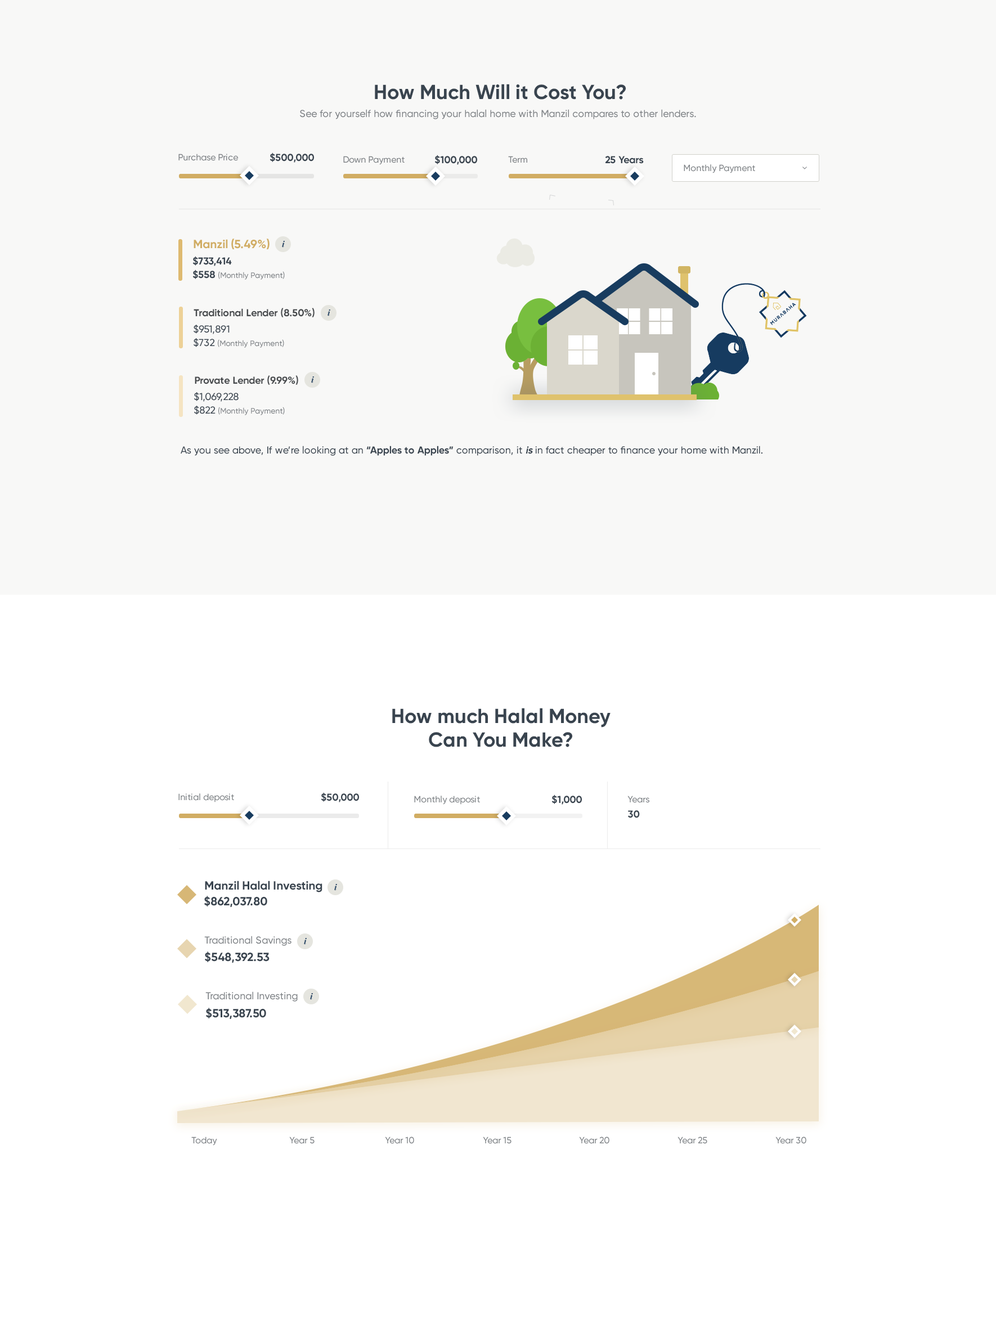
<style>
.page{position:relative;width:996px;height:1320px;background:#ffffff}
.page>*{position:absolute;margin:0}
.t1{font:20.2px "Gilroy-Bold";color:#39444f}
.t2{font:10.1px "Gilroy-Medium";color:#7e8286}
.t3{font:9px "Gilroy-Medium";color:#7e8286}
.t4{font:10.1px "Gilroy-Bold";color:#39444f}
.t5{font:11.8px "Gilroy-Bold";color:#d1ad63}
.t6{font:7.9px "PlayfairDisplay-BoldItalic";color:#183c5f}
.t7{font:7.9px/13.5px "Gilroy-Medium";color:#7e8286}
.t8{font:10.1px/13.5px "Gilroy-Bold";color:#39444f}
.t9{font:10.1px "Gilroy-Bold";color:#484b4e}
.t10{font:10.1px/13.5px "Gilroy-Medium";color:#39444f}
.t11{font:10.1px "Gilroy-Medium";color:#39444f}
.t12{font:10.1px "Gilroy-Bold";color:#39444f;font-style:italic}
.t13{font:20.2px/23.6px "Gilroy-Bold";color:#39444f}
.t14{font:11.8px "Gilroy-Bold";color:#39444f}
</style>
<div class="page">
<p class="t1" style="left:375px;top:84px;width:251px;height:16px">How Much Will it Cost You?</p>
<p class="t2" style="left:300px;top:109px;width:396px;height:10px">See for yourself how financing your halal home with Manzil compares to other lenders.</p>
<p class="t3" style="left:178px;top:154px;width:60px;height:7px">Purchase Price</p>
<p class="t4" style="left:269px;top:152px;width:45px;height:11px">$500,000</p>
<p class="t3" style="left:343px;top:156px;width:61px;height:9px">Down Payment</p>
<p class="t4" style="left:434px;top:155px;width:43px;height:10px">$100,000</p>
<p class="t3" style="left:508px;top:156px;width:19px;height:7px">Term</p>
<p class="t4" style="left:605px;top:156px;width:39px;height:8px">25 Years</p>
<p class="t3" style="left:683px;top:164px;width:72px;height:9px">Monthly Payment</p>
<p class="t5" style="left:194px;top:238px;width:75px;height:11px">Manzil (5.49%)</p>
<p class="t6" style="left:282px;top:241px;width:3px;height:7px">i</p>
<p class="t7" style="left:192px;top:256px;width:93px;height:24px"><span class="t8">$733,414<br>$558 </span>(Monthly Payment)</p>
<p class="t9" style="left:194px;top:308px;width:120px;height:9px">Traditional Lender (8.50%)</p>
<p class="t6" style="left:327px;top:309px;width:3px;height:7px">i</p>
<p class="t7" style="left:194px;top:325px;width:90px;height:23px"><span class="t10">$951,891<br>$732 </span>(Monthly Payment)</p>
<p class="t9" style="left:195px;top:375px;width:103px;height:10px">Provate Lender (9.99%)</p>
<p class="t6" style="left:311px;top:376px;width:3px;height:7px">i</p>
<p class="t7" style="left:194px;top:392px;width:91px;height:23px"><span class="t10">$1,069,228<br>$822 </span>(Monthly Payment)</p>
<p class="t11" style="left:181px;top:446px;width:581px;height:10px">As you see above, If we’re looking at an <span class="t4">“Apples to Apples”</span> comparison, it <span class="t12">is</span> in fact cheaper to finance your home with Manzil.</p>
<p class="t13" style="left:392px;top:708px;width:218px;height:39px;text-align:center">How much Halal Money<br>Can You Make?</p>
<p class="t3" style="left:178px;top:793px;width:56px;height:9px">Initial deposit</p>
<p class="t4" style="left:321px;top:792px;width:38px;height:10px">$50,000</p>
<p class="t3" style="left:414px;top:795px;width:66px;height:9px">Monthly deposit</p>
<p class="t4" style="left:551px;top:794px;width:31px;height:10px">$1,000</p>
<p class="t3" style="left:627px;top:795px;width:22px;height:8px">Years</p>
<p class="t4" style="left:628px;top:810px;width:12px;height:8px">30</p>
<p class="t14" style="left:205px;top:880px;width:117px;height:12px">Manzil Halal Investing</p>
<p class="t6" style="left:334px;top:884px;width:3px;height:6px">i</p>
<p class="t14" style="left:204px;top:896px;width:63px;height:11px">$862,037.80</p>
<p class="t2" style="left:204px;top:935px;width:87px;height:11px">Traditional Savings</p>
<p class="t6" style="left:304px;top:938px;width:3px;height:6px">i</p>
<p class="t14" style="left:205px;top:951px;width:64px;height:11px">$548,392.53</p>
<p class="t2" style="left:205px;top:991px;width:93px;height:10px">Traditional Investing</p>
<p class="t6" style="left:310px;top:993px;width:3px;height:7px">i</p>
<p class="t14" style="left:206px;top:1007px;width:60px;height:12px">$513,387.50</p>
<p class="t3" style="left:191px;top:1136px;width:26px;height:9px">Today</p>
<p class="t3" style="left:289px;top:1136px;width:25px;height:8px">Year 5</p>
<p class="t3" style="left:385px;top:1136px;width:29px;height:8px">Year 10</p>
<p class="t3" style="left:483px;top:1136px;width:28px;height:8px">Year 15</p>
<p class="t3" style="left:579px;top:1136px;width:30px;height:8px">Year 20</p>
<p class="t3" style="left:677px;top:1136px;width:30px;height:8px">Year 25</p>
<p class="t3" style="left:775px;top:1136px;width:31px;height:8px">Year 30</p>
</div>
